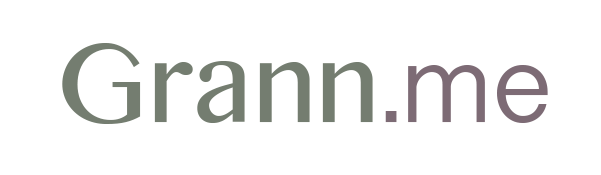
<style>
.page{position:relative;width:601px;height:175px;background:#ffffff}
.page>*{position:absolute;margin:0}
.t1{font:112.9px "LaoMN";color:#747d70}
.t2{font:112.9px "LaoSangamMN";color:#7d6b75}
</style>
<div class="page">
<p class="t1" style="left:62px;top:43px;width:311px;height:81px">Grann</p>
<p class="t2" style="left:385px;top:65px;width:163px;height:58px">.me</p>
</div>
